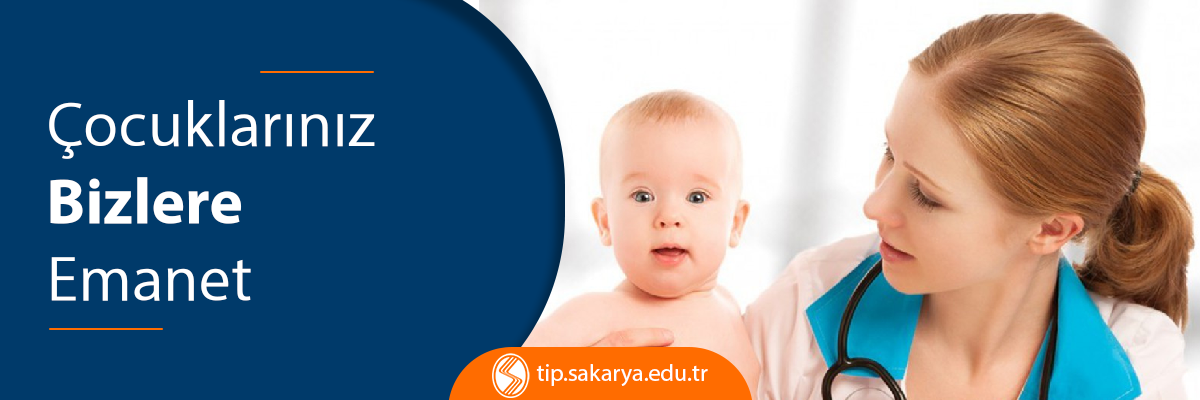
<style>
.page{position:relative;width:1200px;height:400px;background:#003a6a}
.page>*{position:absolute;margin:0}
.t1{font:64.4px "MyriadPro-Regular";color:#ffffff}
.t2{font:64.4px "MyriadPro-Bold";color:#ffffff}
.t3{font:24px "MyriadPro-Regular";color:#ffffff}
</style>
<div class="page">
<p class="t1" style="left:49px;top:100px;width:326px;height:201px">Çocuklarınız<br><span class="t2">Bizlere<br></span>Emanet</p>
<p class="t3" style="left:536px;top:364px;width:172px;height:22px">tip.sakarya.edu.tr</p>
</div>
